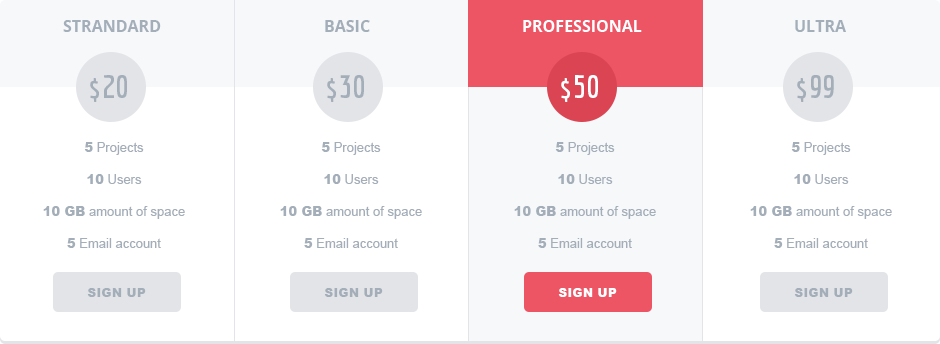
<style>
.page{position:relative;width:940px;height:344px;background:#ffffff}
.page>*{position:absolute;margin:0}
.t1{font:16px "OpenSans-Bold";color:#a4aeb9;text-transform:uppercase}
.t2{font:16px "OpenSans-Bold";color:#a4aeb9}
.t3{font:16px "OpenSans-Bold";color:#ffffff;text-transform:uppercase}
.t4{font:32px "Economica-Bold";color:#a4aeb9}
.t5{font:32px "Economica-Bold";color:#ffffff}
.t6{font:13px/32px "ArialMT";color:#a4aeb9}
.t7{font:13px/32px "Arial-Black";color:#a4aeb9}
.t8{font:12px "Arial-Black";color:#a4aeb9;text-transform:uppercase}
.t9{font:12px "Arial-Black";color:#ffffff;text-transform:uppercase}
</style>
<div class="page">
<p class="t1" style="left:63px;top:20px;width:98px;height:12px">Strandard</p>
<p class="t2" style="left:325px;top:20px;width:45px;height:12px">BASIC</p>
<p class="t3" style="left:523px;top:20px;width:119px;height:12px">professional</p>
<p class="t2" style="left:795px;top:20px;width:51px;height:12px">ULTRA</p>
<p class="t4" style="left:90px;top:75px;width:37px;height:27px">$20</p>
<p class="t4" style="left:327px;top:75px;width:37px;height:27px">$30</p>
<p class="t5" style="left:561px;top:75px;width:37px;height:27px">$50</p>
<p class="t4" style="left:797px;top:75px;width:37px;height:27px">$99</p>
<p class="t6" style="left:43px;top:142px;width:142px;height:106px;text-align:center"><span class="t7">5</span> Projects<br><span class="t7">10</span> Users<br><span class="t7">10 GB</span> amount of space<br><span class="t7">5</span> Email account</p>
<p class="t6" style="left:280px;top:142px;width:142px;height:106px;text-align:center"><span class="t7">5</span> Projects<br><span class="t7">10</span> Users<br><span class="t7">10 GB</span> amount of space<br><span class="t7">5</span> Email account</p>
<p class="t6" style="left:514px;top:142px;width:142px;height:106px;text-align:center"><span class="t7">5</span> Projects<br><span class="t7">10</span> Users<br><span class="t7">10 GB</span> amount of space<br><span class="t7">5</span> Email account</p>
<p class="t6" style="left:750px;top:142px;width:142px;height:106px;text-align:center"><span class="t7">5</span> Projects<br><span class="t7">10</span> Users<br><span class="t7">10 GB</span> amount of space<br><span class="t7">5</span> Email account</p>
<p class="t8" style="left:87px;top:288px;width:59px;height:9px">Sign Up</p>
<p class="t8" style="left:324px;top:288px;width:59px;height:9px">Sign Up</p>
<p class="t9" style="left:558px;top:288px;width:59px;height:9px">Sign Up</p>
<p class="t8" style="left:794px;top:288px;width:59px;height:9px">Sign Up</p>
</div>
